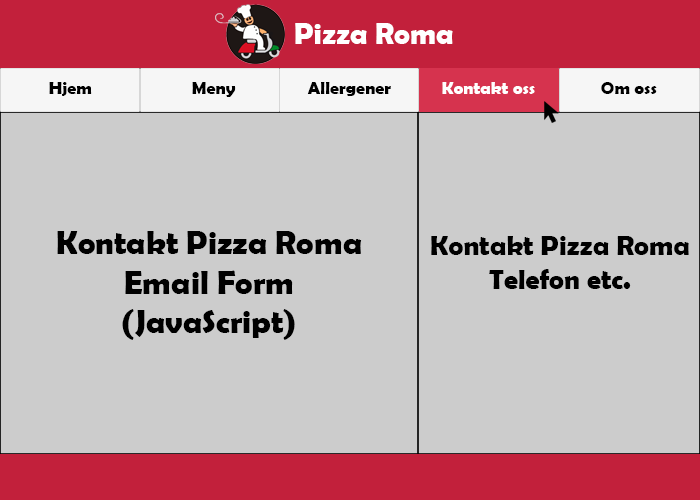
<style>
.page{position:relative;width:700px;height:500px;background:#cccccc}
.page>*{position:absolute;margin:0}
.t1{font:30px "BerlinSansFBDemi-Bold";color:#ffffff}
.t2{font:18px "BerlinSansFBDemi-Bold";color:#000000}
.t3{font:18px "BerlinSansFBDemi-Bold";color:#ffffff}
.t4{font:33px "BerlinSansFBDemi-Bold";color:#000000}
.t5{font:28px "BerlinSansFBDemi-Bold";color:#000000}
</style>
<div class="page">
<p class="t1" style="left:295px;top:23px;width:158px;height:21px">Pizza Roma</p>
<p class="t2" style="left:49px;top:82px;width:43px;height:14px">Hjem</p>
<p class="t2" style="left:192px;top:82px;width:44px;height:15px">Meny</p>
<p class="t2" style="left:307px;top:82px;width:84px;height:14px">Allergener</p>
<p class="t3" style="left:442px;top:82px;width:93px;height:12px">Kontakt oss</p>
<p class="t2" style="left:601px;top:82px;width:56px;height:12px">Om oss</p>
<p class="t4" style="left:57px;top:231px;width:305px;height:109px;text-align:center">Kontakt Pizza Roma<br>Email Form<br>(JavaScript)</p>
<p class="t5" style="left:431px;top:236px;width:258px;height:53px;text-align:center">Kontakt Pizza Roma<br>Telefon etc.</p>
</div>
